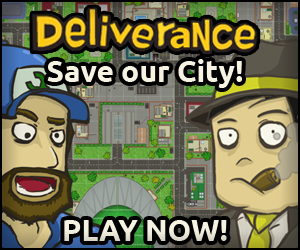
<style>
.page{position:relative;width:300px;height:250px}
.page>*{position:absolute;margin:0}
.t1{font:30px "Ubuntu-Bold";color:#f7f3e2}
</style>
<div class="page">
<p class="t1" style="left:47px;top:59px;width:195px;height:29px">Save our City!</p>
<p class="t1" style="left:64px;top:220px;width:163px;height:21px">PLAY NOW!</p>
</div>
